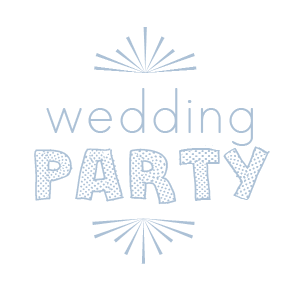
<style>
.page{position:relative;width:300px;height:300px;background:#ffffff}
.page>*{position:absolute;margin:0}
.t1{font:72px "BergamotOrnaments";color:#acc1d6}
.t2{font:72px "PrintClearly";color:#acc1d6}
.t3{font:72px "StefanieDots";color:#acc1d6}
</style>
<div class="page">
<p class="t1" style="left:94px;top:27px;width:103px;height:46px">#</p>
<p class="t2" style="left:46px;top:88px;width:207px;height:58px">wedding</p>
<p class="t3" style="left:34px;top:145px;width:236px;height:60px">PARTY</p>
<p class="t1" style="left:92px;top:218px;width:103px;height:46px;rotate:-180deg">#</p>
</div>
